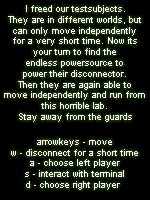
<style>
.page{position:relative;width:150px;height:200px;background:#000000}
.page>*{position:absolute;margin:0}
.t1{font:9px "ArialMT";color:#ffffff}
</style>
<div class="page">
<p class="t1" style="left:4px;top:5px;width:141px;height:117px;text-align:center">I freed our testsubjects.<br>They are in different worlds, but<br>can only move independently<br>for a very short time. Now its<br>your turn to find the<br>endless powersource to<br>power their disconnector.<br>Then they are again able to<br>move independently and run from<br>this horrible lab.<br>Stay away from the guards</p>
<p class="t1" style="left:11px;top:138px;width:127px;height:52px;text-align:center">arrowkeys - move<br>w - disconnect for a short time<br>a - choose left player<br>s - interact with terminal<br>d - choose right player</p>
</div>
